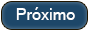
<style>
.page{position:relative;width:89px;height:31px;background:#1d4769}
.page>*{position:absolute;margin:0}
.t1{font:18px "Latha";color:#ffffff}
</style>
<div class="page">
<p class="t1" style="left:16px;top:7px;width:59px;height:13px">Próximo</p>
</div>
